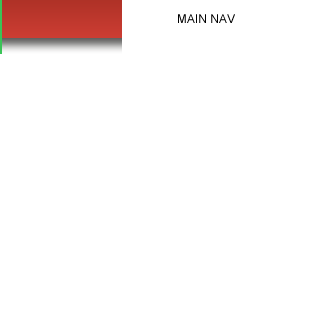
<style>
.page{position:relative;width:320px;height:332px;background:#ffffff}
.page>*{position:absolute;margin:0}
.t1{font:12px "ArialMT";color:#000000;text-transform:uppercase}
</style>
<div class="page">
<p class="t1" style="left:178px;top:14px;width:57px;height:9px">Main nav</p>
</div>
